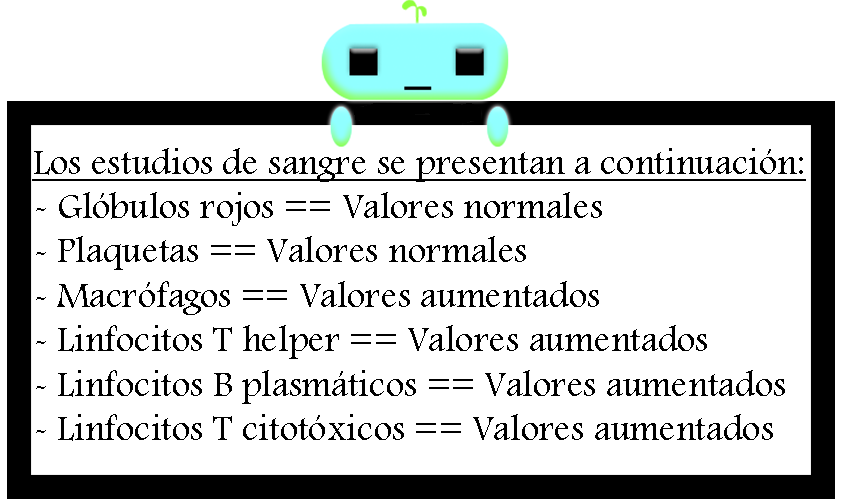
<style>
.page{position:relative;width:842px;height:500px;background:#ffffff}
.page>*{position:absolute;margin:0}
.t1{font:37px "FootlightMTLight";color:#000000}
.t2{font:37px "FootlightMTLight";color:#000000;text-decoration:underline}
</style>
<div class="page">
<p class="t1" style="left:32px;top:148px;width:774px;height:293px"><span class="t2">Los estudios de sangre se presentan a continuación:<br></span>- Glóbulos rojos == Valores normales<br>- Plaquetas == Valores normales<br>- Macrófagos == Valores aumentados<br>- Linfocitos T helper == Valores aumentados<br>- Linfocitos B plasmáticos == Valores aumentados<br>- Linfocitos T citotóxicos == Valores aumentados</p>
</div>
